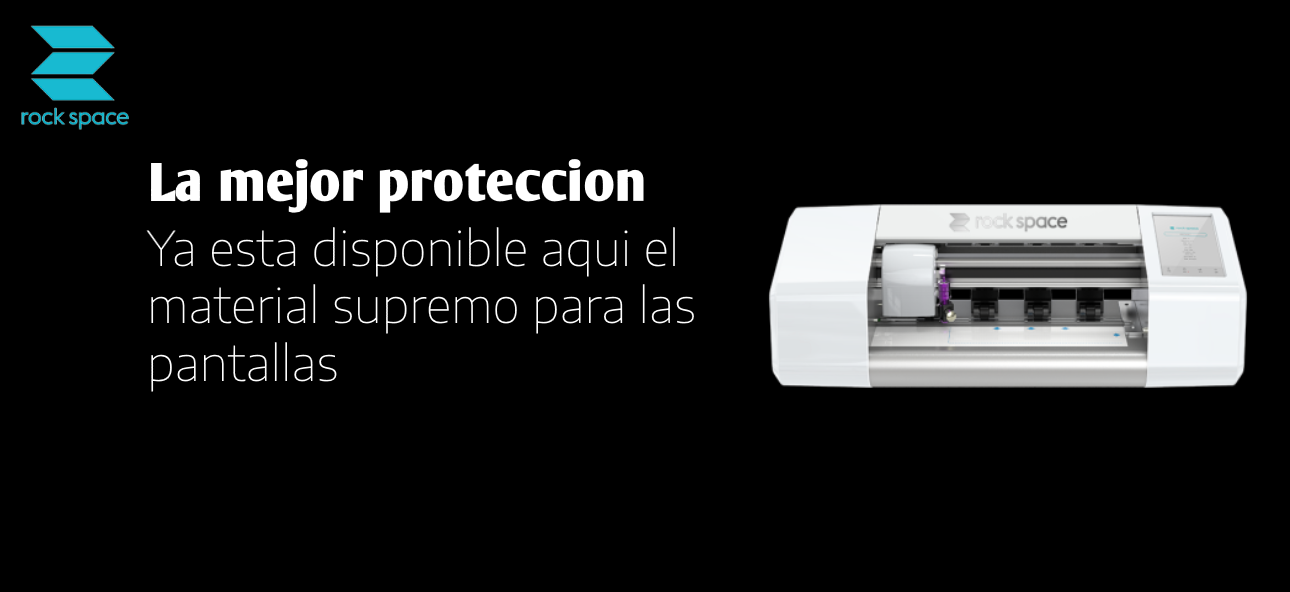
<style>
.page{position:relative;width:1290px;height:592px;background:#000000}
.page>*{position:absolute;margin:0}
.t1{font:53px "ArmWrestler-Bold";color:#ffffff}
.t2{font:48px "EncodeSansSemiExpanded-Thin";color:#ffffff}
</style>
<div class="page">
<p class="t1" style="left:151px;top:158px;width:493px;height:55px">La mejor proteccion</p>
<p class="t2" style="left:146px;top:227px;width:548px;height:165px">Ya esta disponible aqui el material supremo para las pantallas</p>
</div>
